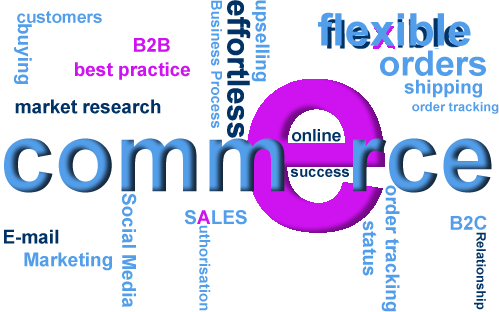
<style>
.page{position:relative;width:499px;height:312px;background:#ffffff}
.page>*{position:absolute;margin:0}
.t1{font:15px "Arial-BoldMT";color:#539eea}
.t2{font:31px "Arial-BoldMT";color:#003265}
.t3{font:19px "Arial-BoldMT";color:#539eea}
.t4{font:17px "Arial-BoldMT";color:#539eea}
.t5{font:45px "Arial-BoldMT";color:#539eea}
.t6{font:19px "Arial-BoldMT";color:#ce12f0}
.t7{font:35px "Arial-BoldMT";color:#539eea}
.t8{font:19px "Arial-BoldMT";color:#003265}
.t9{font:13px "Arial-BoldMT";color:#539eea}
.t10{font:17px "Arial-BoldMT";color:#003265}
.t11{font:99px "Arial-BoldMT"}
.t12{font:15px "Arial-BoldMT";color:#003265}
.t13{font:13px "Arial-BoldMT";color:#003265}
</style>
<div class="page">
<p class="t1" style="left:211px;top:0px;width:11px;height:128px;rotate:90deg">Business Process</p>
<p class="t2" style="left:227px;top:0px;width:24px;height:138px;rotate:90deg">effortless</p>
<p class="t3" style="left:251px;top:0px;width:19px;height:82px;rotate:90deg">upselling</p>
<p class="t4" style="left:17px;top:10px;width:85px;height:13px">customers</p>
<p class="t5" style="left:318px;top:12px;width:153px;height:34px">flexible</p>
<p class="t3" style="left:14px;top:24px;width:18px;height:60px;rotate:90deg">buying</p>
<p class="t6" style="left:134px;top:38px;width:36px;height:14px">B2B</p>
<p class="t7" style="left:380px;top:50px;width:106px;height:26px">orders</p>
<p class="t6" style="left:75px;top:62px;width:115px;height:18px">best practice</p>
<p class="t3" style="left:404px;top:79px;width:78px;height:19px">shipping</p>
<p class="t8" style="left:15px;top:99px;width:146px;height:15px">market research</p>
<p class="t9" style="left:412px;top:102px;width:87px;height:12px">order tracking</p>
<p class="t10" style="left:292px;top:129px;width:49px;height:13px">online</p>
<p class="t11" style="left:4px;top:138px;width:488px;height:55px">comm  rce</p>
<p class="t12" style="left:290px;top:168px;width:59px;height:9px">success</p>
<p class="t3" style="left:362px;top:185px;width:38px;height:127px;rotate:90deg">order tracking status</p>
<p class="t3" style="left:122px;top:193px;width:15px;height:115px;rotate:90deg">Social Media</p>
<p class="t3" style="left:184px;top:210px;width:63px;height:15px">S<span class="t6">A</span>LES</p>
<p class="t3" style="left:450px;top:215px;width:37px;height:15px">B2C</p>
<p class="t3" style="left:4px;top:229px;width:108px;height:42px"><span class="t8">E-mail</span> <br>    Marketing</p>
<p class="t1" style="left:199px;top:225px;width:12px;height:86px;rotate:90deg">uthorisation</p>
<p class="t13" style="left:474px;top:232px;width:12px;height:78px;rotate:90deg">Relationship</p>
</div>
